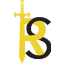
<style>
.page{position:relative;width:64px;height:64px;background:#ffffff}
.page>*{position:absolute;margin:0}
.t1{font:55.9px "AvenirNextLTPro-Regular";color:#212121}
</style>
<div class="page">
<p class="t1" style="left:25px;top:17px;width:26px;height:42px">S</p>
</div>
